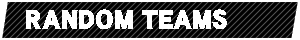
<style>
.page{position:relative;width:300px;height:40px;background:#ffffff}
.page>*{position:absolute;margin:0}
.t1{font:24px "DFGothic-SU-WINP-RKSJ-H";color:#ffffff}
</style>
<div class="page">
<p class="t1" style="left:26px;top:9px;width:201px;height:20px">RANDOM TEAMS</p>
</div>
